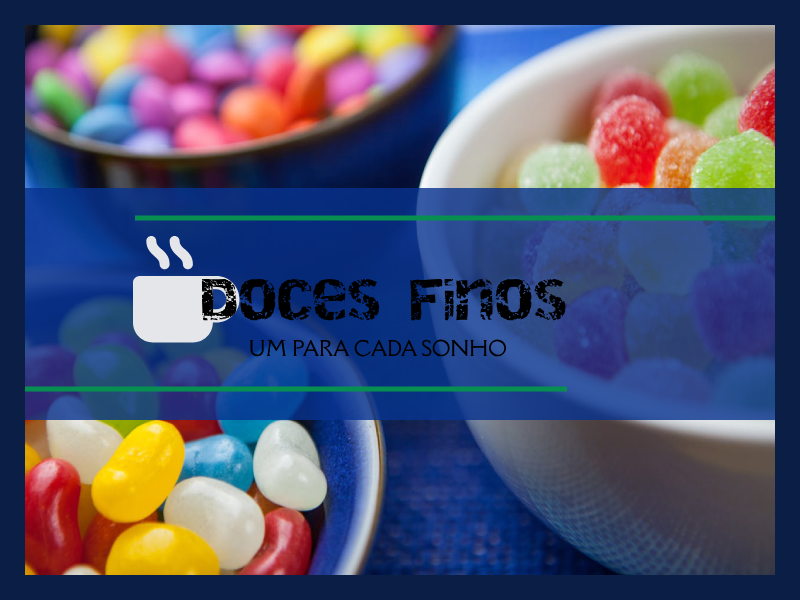
<style>
.page{position:relative;width:800px;height:600px}
.page>*{position:absolute;margin:0}
.t1{font:41.2px "Destroy";color:#000000}
.t2{font:20.1px "DellaRespira-Regular";color:#000000}
.t3{font:20.1px "DellaRespira-Regular";color:#6f8aed}
</style>
<div class="page">
<p class="t1" style="left:201px;top:278px;width:365px;height:43px">Doces Finos</p>
<p class="t2" style="left:249px;top:339px;width:257px;height:18px"><span class="t3">U</span>M PARA CADA SONHO</p>
</div>
